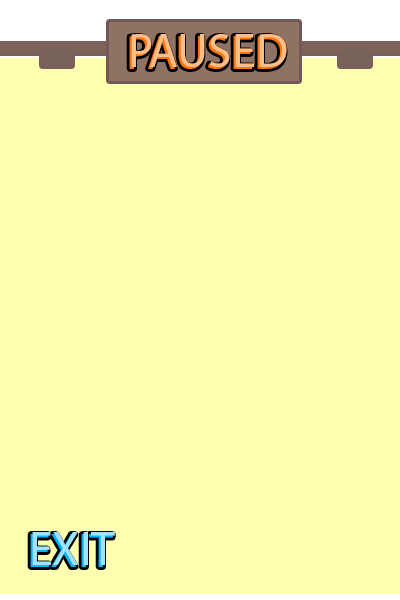
<style>
.page{position:relative;width:400px;height:600px;background:#ffffb0}
.page>*{position:absolute;margin:0}
.t1{font:48px "MyriadPro-Regular"}
.t2{font:48px "MyriadPro-Regular";color:#ffbd88}
.t3{font:48px "MyriadPro-Regular";color:#a1e3ff}
</style>
<div class="page">
<p class="t1" style="left:129px;top:36px;width:156px;height:33px">PAUSED</p>
<p class="t2" style="left:131px;top:34px;width:156px;height:33px">PAUSED</p>
<p class="t1" style="left:30px;top:534px;width:83px;height:33px">EXIT</p>
<p class="t3" style="left:32px;top:532px;width:83px;height:33px">EXIT</p>
</div>
